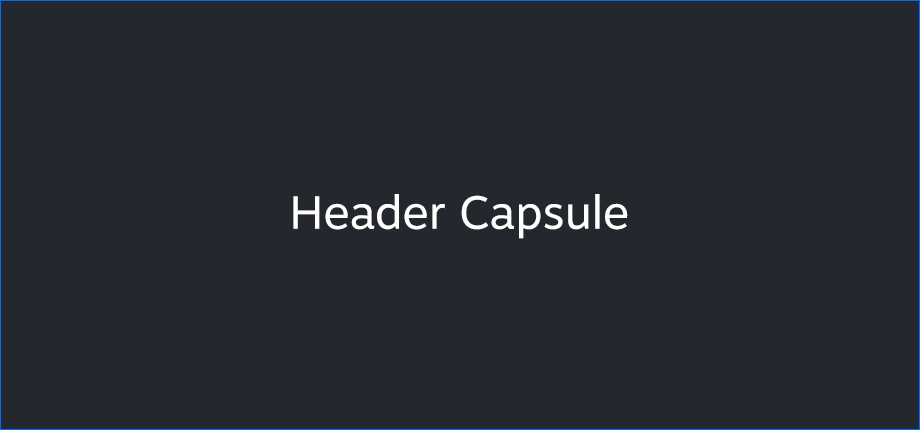
<style>
.page{position:relative;width:920px;height:430px;background:#24282e}
.page>*{position:absolute;margin:0}
.t1{font:46.3px "MotivaSans-Regular";color:#ffffff}
</style>
<div class="page">
<p class="t1" style="left:293px;top:194px;width:335px;height:45px">Header Capsule</p>
</div>
